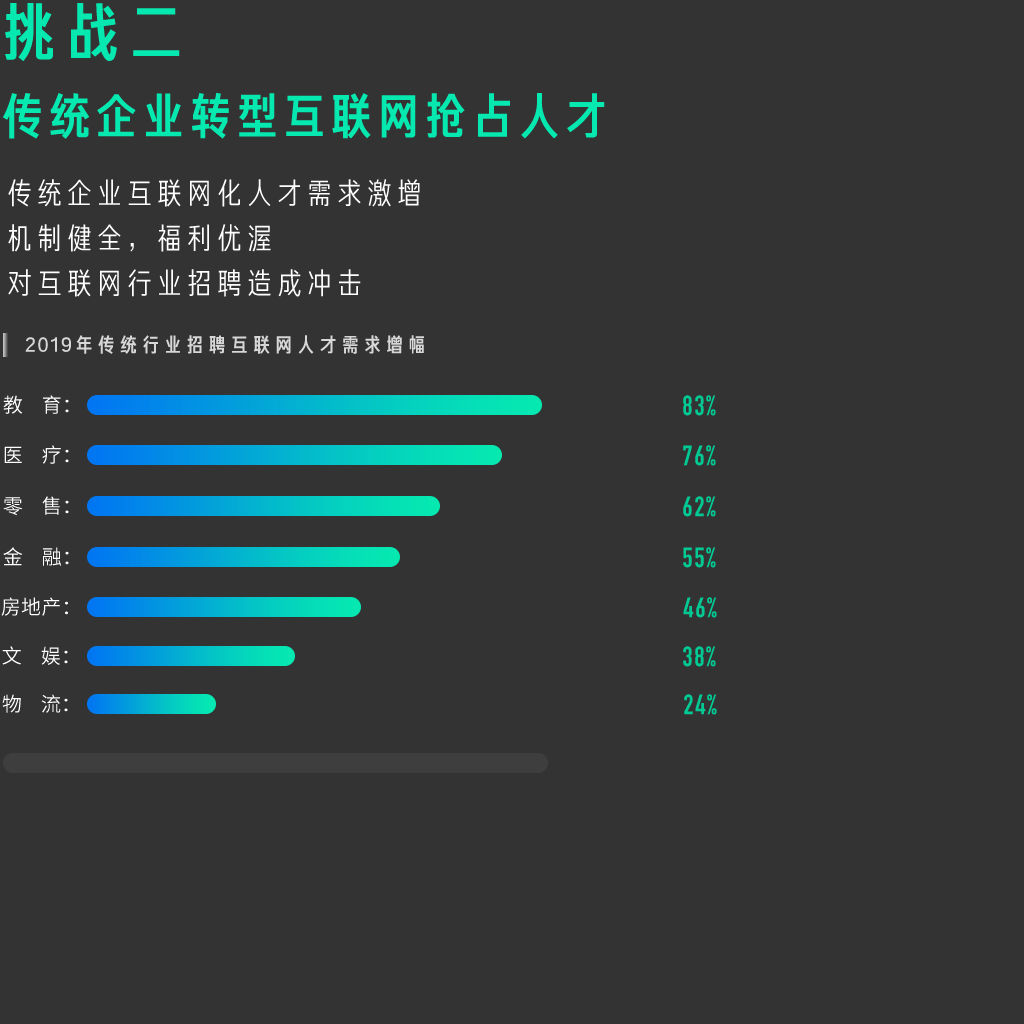
<style>
.page{position:relative;width:1024px;height:1024px;background:#333333}
.page>*{position:absolute;margin:0}
.t1{font:63.4px "FZCJHJW--GB1-0";color:#05e9b1}
.t2{font:50px "FZCJHJW--GB1-0";letter-spacing:-0.06em;color:#05e9b1}
.t3{font:30px "FZJHJW--GB1-0";color:#ffffff}
.t4{font:20.2px "FZCJHJW--GB1-0";letter-spacing:0.1em;color:#d7d7d7}
.t5{font:20px "SourceHanSansCN-Normal";letter-spacing:0.01em;color:#ffffff}
.t6{font:27.7px "DINCondensed-Bold";letter-spacing:0.06em;color:#02c993}
</style>
<div class="page">
<p class="t1" style="left:5px;top:3px;width:175px;height:58px">挑战二</p>
<p class="t2" style="left:3px;top:92px;width:602px;height:47px">传统企业转型互联网抢占人才</p>
<p class="t3" style="left:8px;top:179px;width:412px;height:28px">传统企业互联网化人才需求激增</p>
<p class="t3" style="left:8px;top:224px;width:263px;height:28px">机制健全，福利优渥</p>
<p class="t3" style="left:8px;top:269px;width:353px;height:28px">对互联网行业招聘造成冲击</p>
<p class="t4" style="left:25px;top:335px;width:399px;height:19px">2019年传统行业招聘互联网人才需求增幅</p>
<p class="t5" style="left:3px;top:395px;width:66px;height:19px">教    育：</p>
<p class="t6" style="left:683px;top:395px;width:33px;height:21px">83%</p>
<p class="t5" style="left:4px;top:445px;width:65px;height:19px">医    疗：</p>
<p class="t6" style="left:683px;top:445px;width:33px;height:21px">76%</p>
<p class="t5" style="left:3px;top:496px;width:66px;height:20px">零    售：</p>
<p class="t6" style="left:683px;top:496px;width:33px;height:21px">62%</p>
<p class="t5" style="left:3px;top:547px;width:66px;height:19px">金    融：</p>
<p class="t6" style="left:683px;top:547px;width:33px;height:21px">55%</p>
<p class="t5" style="left:1px;top:597px;width:67px;height:19px">房地产：</p>
<p class="t6" style="left:683px;top:597px;width:34px;height:21px">46%</p>
<p class="t5" style="left:2px;top:646px;width:66px;height:19px">文    娱：</p>
<p class="t6" style="left:683px;top:646px;width:33px;height:21px">38%</p>
<p class="t5" style="left:2px;top:694px;width:66px;height:19px">物    流：</p>
<p class="t6" style="left:684px;top:694px;width:33px;height:21px">24%</p>
</div>
